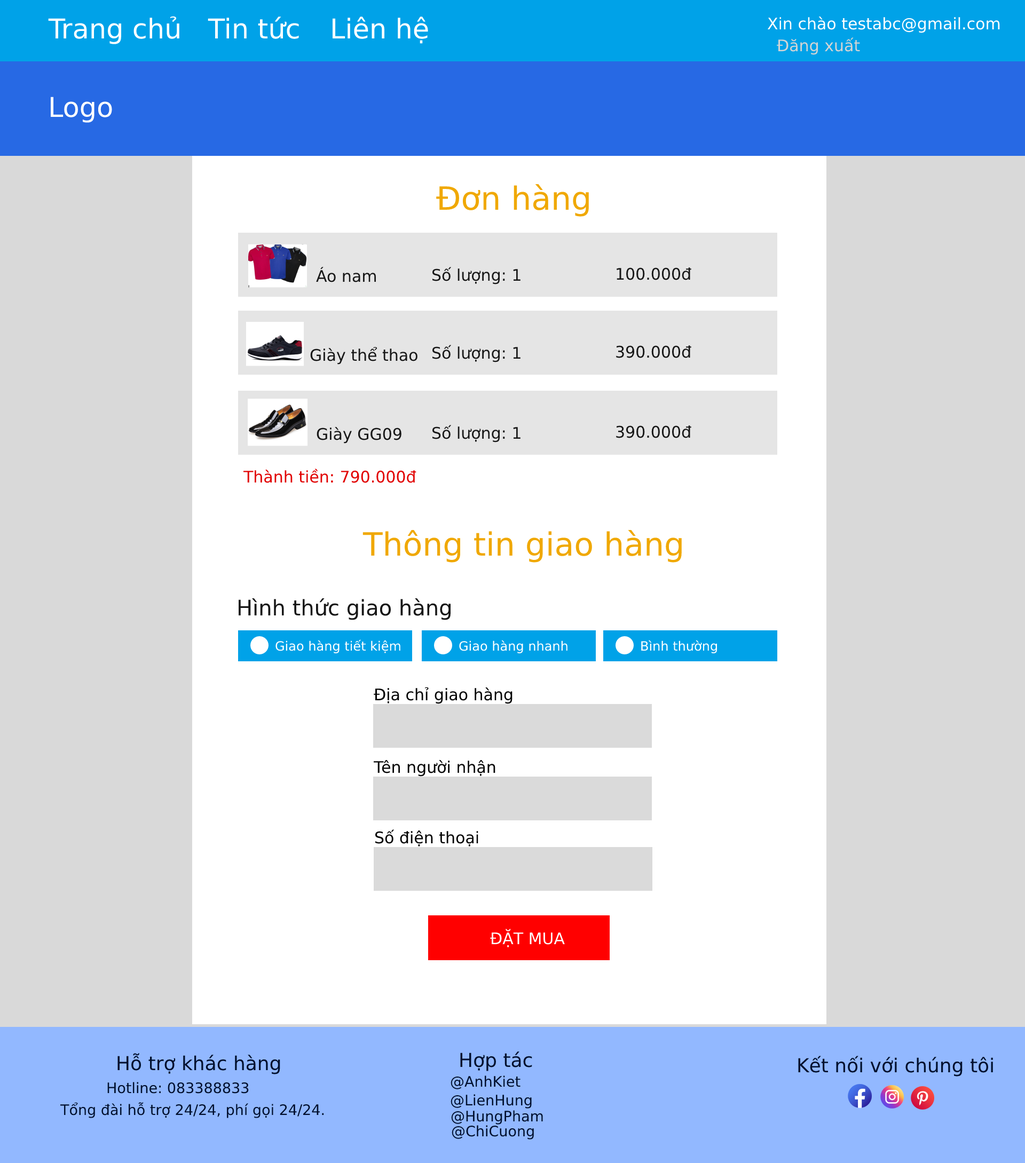
<style>
.page{position:relative;width:1025px;height:1163px;background:#ffffff}
.page>*{position:absolute;margin:0}
.t1{font:27.2px "DejaVuSans";color:#ffffff}
.t2{font:16px "DejaVuSans";color:#ffffff}
.t3{font:16px "DejaVuSans";color:#d4d4d4}
.t4{font:32px "DejaVuSans";color:#f0a800}
.t5{font:16px "DejaVuSans";color:#171717}
.t6{font:16px "DejaVuSans";color:#e10000}
.t7{font:21.4px "DejaVuSans";color:#161616}
.t8{font:12.8px "DejaVuSans";color:#ffffff}
.t9{font:16px "DejaVuSans";color:#010101}
.t10{font:19.2px "DejaVuSans";color:#00102e}
.t11{font:14.4px "DejaVuSans";color:#00102e}
</style>
<div class="page">
<p class="t1" style="left:48px;top:16px;width:131px;height:28px">Trang chủ</p>
<p class="t1" style="left:208px;top:17px;width:91px;height:22px">Tin tức</p>
<p class="t1" style="left:333px;top:17px;width:95px;height:27px">Liên hệ</p>
<p class="t2" style="left:767px;top:17px;width:233px;height:16px">Xin chào testabc@gmail.com</p>
<p class="t3" style="left:777px;top:37px;width:83px;height:18px">Đăng xuất</p>
<p class="t1" style="left:51px;top:97px;width:61px;height:26px">Logo</p>
<p class="t4" style="left:436px;top:184px;width:153px;height:33px">Đơn hàng</p>
<p class="t5" style="left:316px;top:267px;width:60px;height:15px">Áo nam</p>
<p class="t5" style="left:432px;top:267px;width:89px;height:18px">Số lượng: 1</p>
<p class="t5" style="left:617px;top:267px;width:74px;height:13px">100.000đ</p>
<p class="t5" style="left:310px;top:347px;width:107px;height:18px">Giày thể thao</p>
<p class="t5" style="left:432px;top:345px;width:89px;height:17px">Số lượng: 1</p>
<p class="t5" style="left:616px;top:345px;width:75px;height:13px">390.000đ</p>
<p class="t5" style="left:432px;top:425px;width:89px;height:18px">Số lượng: 1</p>
<p class="t5" style="left:616px;top:425px;width:75px;height:13px">390.000đ</p>
<p class="t5" style="left:317px;top:427px;width:84px;height:17px">Giày GG09</p>
<p class="t6" style="left:243px;top:469px;width:173px;height:14px">Thành tiền: 790.000đ</p>
<p class="t4" style="left:362px;top:530px;width:320px;height:33px">Thông tin giao hàng</p>
<p class="t7" style="left:238px;top:598px;width:213px;height:22px">Hình thức giao hàng</p>
<p class="t8" style="left:275px;top:640px;width:125px;height:13px">Giao hàng tiết kiệm</p>
<p class="t8" style="left:459px;top:640px;width:109px;height:13px">Giao hàng nhanh</p>
<p class="t8" style="left:641px;top:640px;width:76px;height:13px">Bình thường</p>
<p class="t9" style="left:374px;top:687px;width:139px;height:17px">Địa chỉ giao hàng</p>
<p class="t9" style="left:373px;top:760px;width:122px;height:17px">Tên người nhận</p>
<p class="t9" style="left:375px;top:830px;width:103px;height:17px">Số điện thoại</p>
<p class="t2" style="left:490px;top:929px;width:75px;height:19px">ĐẶT MUA</p>
<p class="t10" style="left:117px;top:1053px;width:163px;height:22px">Hỗ trợ khác hàng</p>
<p class="t10" style="left:460px;top:1052px;width:72px;height:19px">Hợp tác</p>
<p class="t10" style="left:798px;top:1056px;width:195px;height:21px">Kết nối với chúng tôi</p>
<p class="t11" style="left:107px;top:1082px;width:142px;height:12px">Hotline: 083388833</p>
<p class="t11" style="left:451px;top:1076px;width:70px;height:14px">@AnhKiet</p>
<p class="t11" style="left:451px;top:1094px;width:81px;height:15px">@LienHung</p>
<p class="t11" style="left:60px;top:1102px;width:264px;height:16px">Tổng đài hỗ trợ 24/24, phí gọi 24/24.</p>
<p class="t11" style="left:451px;top:1110px;width:92px;height:15px">@HungPham</p>
<p class="t11" style="left:452px;top:1125px;width:82px;height:15px">@ChiCuong</p>
</div>
